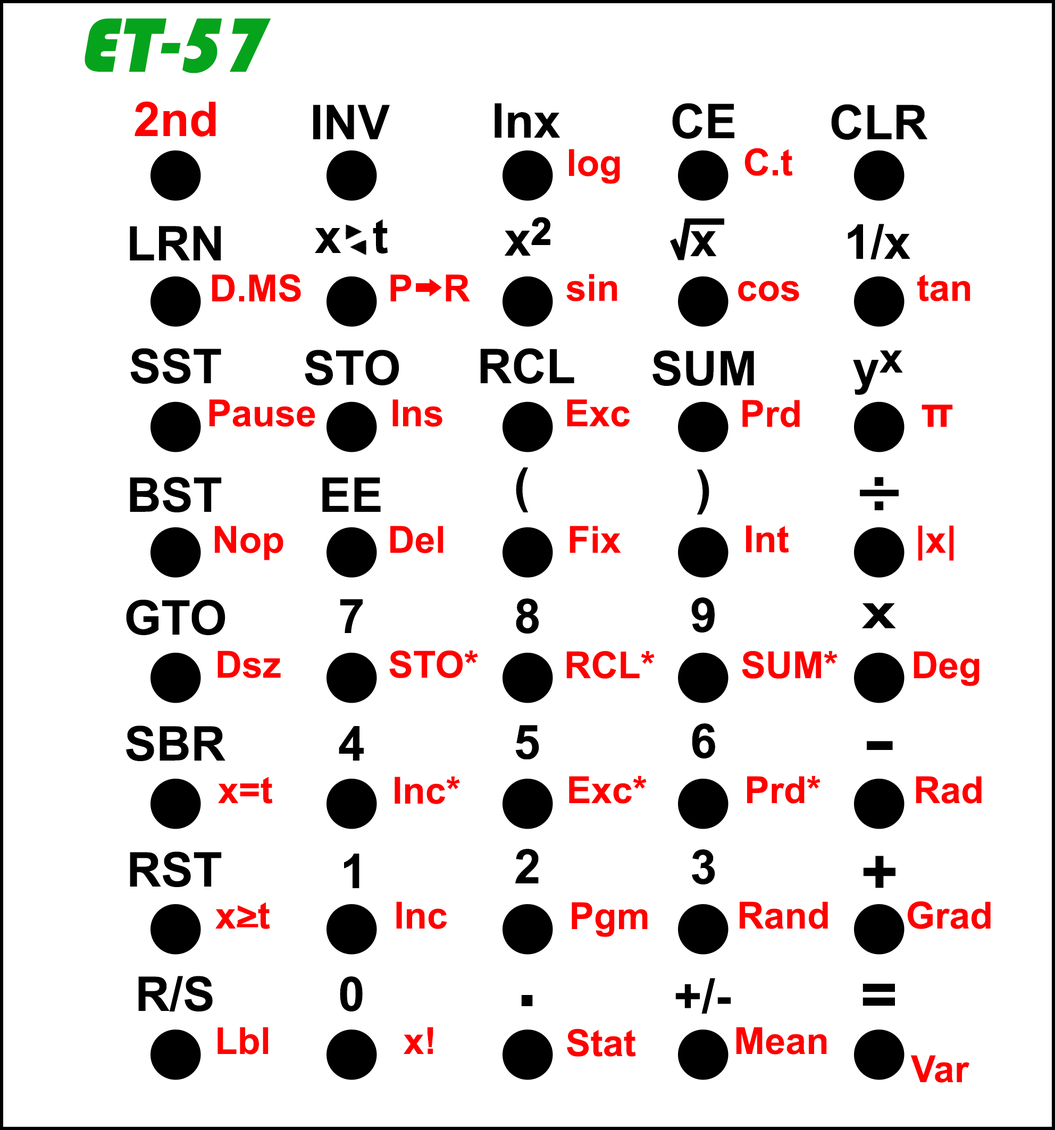
<style>
.page{position:relative;width:1055px;height:1130px;background:#ffffff}
.page>*{position:absolute;margin:0}
.t1{font:79.8px "Bauhaus93";color:#05a41c;font-style:italic}
.t2{font:47.9px "Arial-BoldMT";color:#ff0000}
.t3{font:47.9px "Arial-BoldMT";color:#000000}
.t4{font:37.2px "Arial-BoldMT";color:#ff0000}
.t5{font:37.2px "Arial-BoldMT";color:#000000;font-weight:bold}
.t6{font:42.5px "Arial-BoldMT";color:#000000}
.t7{font:42.5px "Arial-BoldMT";color:#ff0000}
.t8{font:63.8px "Arial-BoldMT";color:#000000}
.t9{font:47.9px "Arial-BoldMT";letter-spacing:0.1em;color:#000000;scale:3 1}
.t10{font:47.9px "Arial-BoldMT";letter-spacing:0.1em;color:#000000;scale:1.3 1}
.t11{font:63.8px "Arial-BoldMT";letter-spacing:0.1em;color:#000000;scale:1.5 1}
.t12{font:63.8px "Arial-BoldMT";letter-spacing:0.1em;color:#000000}
.t13{font:79.8px "Arial-BoldMT";color:#000000}
</style>
<div class="page">
<p class="t1" style="left:85px;top:18px;width:186px;height:55px">ET-57</p>
<p class="t2" style="left:135px;top:102px;width:81px;height:35px">2nd</p>
<p class="t3" style="left:313px;top:105px;width:77px;height:34px">INV</p>
<p class="t3" style="left:494px;top:103px;width:66px;height:35px">lnx</p>
<p class="t3" style="left:672px;top:103px;width:62px;height:36px">CE</p>
<p class="t3" style="left:831px;top:104px;width:96px;height:36px">CLR</p>
<p class="t4" style="left:569px;top:149px;width:51px;height:35px">log</p>
<p class="t4" style="left:744px;top:148px;width:49px;height:28px">C.t</p>
<p class="t3" style="left:315px;top:219px;width:73px;height:35px">x   t</p>
<p class="t3" style="left:505px;top:217px;width:45px;height:39px">x<span class="t5">2</span></p>
<p class="t3" style="left:130px;top:226px;width:91px;height:35px">LRN</p>
<p class="t3" style="left:690px;top:231px;width:27px;height:25px">x</p>
<p class="t3" style="left:848px;top:224px;width:62px;height:35px">1/x</p>
<p class="t4" style="left:212px;top:274px;width:89px;height:28px">D.MS</p>
<p class="t4" style="left:390px;top:274px;width:80px;height:27px">P   R</p>
<p class="t4" style="left:566px;top:274px;width:51px;height:27px">sin</p>
<p class="t4" style="left:738px;top:281px;width:61px;height:20px">cos</p>
<p class="t4" style="left:917px;top:274px;width:53px;height:27px">tan</p>
<p class="t3" style="left:130px;top:348px;width:91px;height:36px">SST</p>
<p class="t3" style="left:305px;top:350px;width:94px;height:35px">STO</p>
<p class="t3" style="left:480px;top:348px;width:94px;height:36px">RCL</p>
<p class="t3" style="left:652px;top:350px;width:102px;height:36px">SUM</p>
<p class="t3" style="left:853px;top:350px;width:50px;height:45px">y<span class="t6">x</span></p>
<p class="t4" style="left:209px;top:399px;width:106px;height:28px">Pause</p>
<p class="t4" style="left:392px;top:399px;width:50px;height:28px">Ins</p>
<p class="t4" style="left:567px;top:399px;width:63px;height:28px">Exc</p>
<p class="t4" style="left:742px;top:400px;width:58px;height:27px">Prd</p>
<p class="t7" style="left:921px;top:405px;width:32px;height:22px">π</p>
<p class="t3" style="left:516px;top:467px;width:13px;height:46px">(</p>
<p class="t3" style="left:697px;top:469px;width:12px;height:46px">)</p>
<p class="t3" style="left:130px;top:477px;width:92px;height:36px">BST</p>
<p class="t3" style="left:322px;top:477px;width:59px;height:35px">EE</p>
<p class="t8" style="left:874px;top:477px;width:10px;height:33px">:</p>
<p class="t9" style="left:860px;top:490px;width:39px;height:7px">-</p>
<p class="t4" style="left:215px;top:526px;width:68px;height:34px">Nop</p>
<p class="t4" style="left:390px;top:526px;width:53px;height:27px">Del</p>
<p class="t4" style="left:569px;top:526px;width:52px;height:27px">Fix</p>
<p class="t4" style="left:746px;top:525px;width:43px;height:28px">Int</p>
<p class="t4" style="left:918px;top:525px;width:36px;height:36px">|x|</p>
<p class="t3" style="left:126px;top:600px;width:99px;height:35px">GTO</p>
<p class="t3" style="left:340px;top:599px;width:23px;height:34px">7</p>
<p class="t3" style="left:516px;top:599px;width:23px;height:35px">8</p>
<p class="t3" style="left:691px;top:598px;width:24px;height:35px">9</p>
<p class="t10" style="left:862px;top:603px;width:34px;height:25px">x</p>
<p class="t4" style="left:217px;top:651px;width:64px;height:27px">Dsz</p>
<p class="t4" style="left:389px;top:650px;width:89px;height:28px">STO*</p>
<p class="t4" style="left:566px;top:651px;width:89px;height:28px">RCL*</p>
<p class="t4" style="left:742px;top:651px;width:95px;height:28px">SUM*</p>
<p class="t4" style="left:913px;top:651px;width:66px;height:35px">Deg</p>
<p class="t3" style="left:126px;top:726px;width:99px;height:35px">SBR</p>
<p class="t3" style="left:515px;top:725px;width:24px;height:35px">5</p>
<p class="t3" style="left:692px;top:724px;width:23px;height:35px">6</p>
<p class="t3" style="left:339px;top:726px;width:25px;height:35px">4</p>
<p class="t11" style="left:867px;top:741px;width:26px;height:9px">-</p>
<p class="t4" style="left:218px;top:777px;width:55px;height:27px">x=t</p>
<p class="t4" style="left:395px;top:776px;width:65px;height:28px">Inc*</p>
<p class="t4" style="left:569px;top:776px;width:78px;height:28px">Exc*</p>
<p class="t4" style="left:747px;top:776px;width:73px;height:28px">Prd*</p>
<p class="t4" style="left:916px;top:776px;width:66px;height:28px">Rad</p>
<p class="t3" style="left:130px;top:852px;width:92px;height:35px">RST</p>
<p class="t3" style="left:344px;top:854px;width:15px;height:34px">1</p>
<p class="t3" style="left:515px;top:849px;width:24px;height:35px">2</p>
<p class="t3" style="left:692px;top:850px;width:23px;height:35px">3</p>
<p class="t12" style="left:863px;top:856px;width:32px;height:32px">+</p>
<p class="t4" style="left:215px;top:902px;width:55px;height:27px">x&gt;t</p>
<p class="t4" style="left:396px;top:902px;width:51px;height:27px">Inc</p>
<p class="t4" style="left:572px;top:902px;width:76px;height:35px">Pgm</p>
<p class="t4" style="left:740px;top:902px;width:88px;height:27px">Rand</p>
<p class="t4" style="left:907px;top:901px;width:84px;height:28px">Grad</p>
<p class="t4" style="left:237px;top:924px;width:21px;height:4px">_</p>
<p class="t3" style="left:138px;top:976px;width:75px;height:36px">R/S</p>
<p class="t3" style="left:340px;top:977px;width:23px;height:35px">0</p>
<p class="t3" style="left:675px;top:978px;width:56px;height:36px">+/-</p>
<p class="t12" style="left:862px;top:984px;width:33px;height:23px">=</p>
<p class="t13" style="left:521px;top:995px;width:12px;height:12px">.</p>
<p class="t4" style="left:217px;top:1027px;width:52px;height:28px">Lbl</p>
<p class="t4" style="left:404px;top:1027px;width:29px;height:27px">x!</p>
<p class="t4" style="left:567px;top:1029px;width:69px;height:28px">Stat</p>
<p class="t4" style="left:736px;top:1027px;width:91px;height:28px">Mean</p>
<p class="t4" style="left:910px;top:1055px;width:59px;height:28px">Var</p>
</div>
